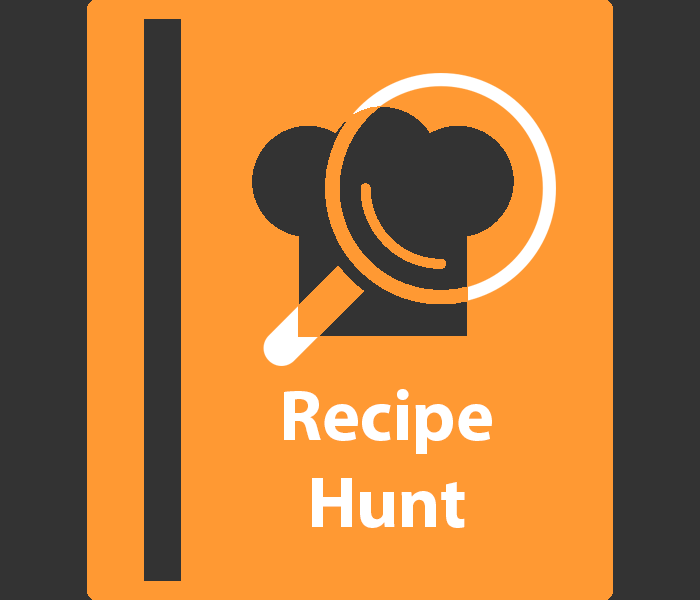
<style>
.page{position:relative;width:700px;height:600px;background:#ff9933}
.page>*{position:absolute;margin:0}
.t1{font:72px "MyriadPro-Bold";color:#ffffff}
</style>
<div class="page">
<p class="t1" style="left:284px;top:389px;width:208px;height:139px;text-align:center">Recipe<br>Hunt</p>
</div>
